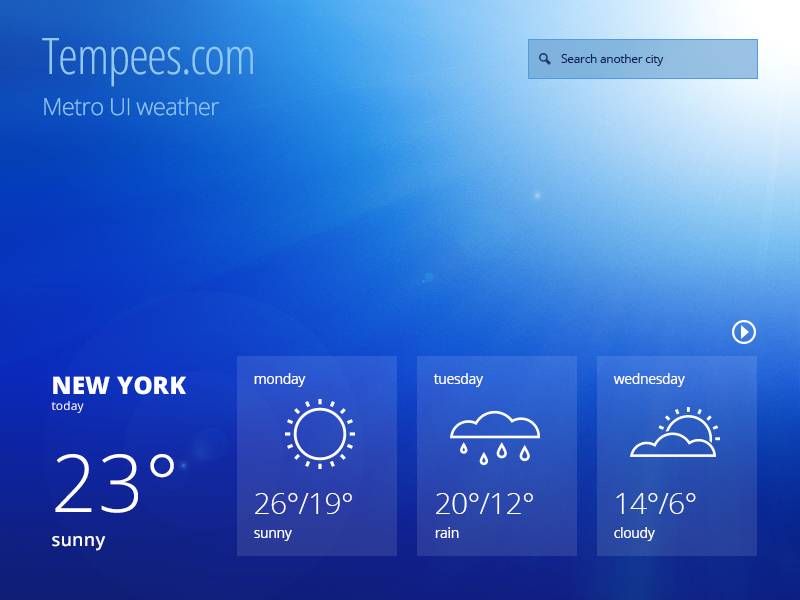
<style>
.page{position:relative;width:800px;height:600px}
.page>*{position:absolute;margin:0}
.t1{font:23.6px/40.4px "OpenSans-Light";letter-spacing:-0.025em;color:#90c9f4}
.t2{font:50.5px/40.4px "OpenSans-CondensedLight";letter-spacing:-0.025em;color:#90c9f4}
.t3{font:12px "OpenSans";letter-spacing:-0.025em;color:#0d1e57}
.t4{font:24px "OpenSans-Extrabold";letter-spacing:0.013em;color:#ffffff}
.t5{font:14px "OpenSans";letter-spacing:-0.025em;color:#ffffff}
.t6{font:12px "OpenSans";letter-spacing:0.013em;color:#ffffff}
.t7{font:80px "OpenSans-Light";letter-spacing:0.013em;color:#ffffff}
.t8{font:30px/24px "OpenSans-Light";letter-spacing:-0.025em;color:#ffffff}
.t9{font:14px/24px "OpenSans";letter-spacing:-0.025em;color:#ffffff}
.t10{font:18px "OpenSans-Semibold";letter-spacing:0.013em;color:#ffffff}
</style>
<div class="page">
<p class="t1" style="left:42px;top:38px;width:211px;height:78px"><span class="t2">Tempees.com<br></span>Metro UI weather</p>
<p class="t3" style="left:561px;top:54px;width:103px;height:12px">Search another city</p>
<p class="t4" style="left:53px;top:376px;width:133px;height:19px">NEW YORK</p>
<p class="t5" style="left:254px;top:373px;width:52px;height:14px">monday</p>
<p class="t5" style="left:433px;top:373px;width:51px;height:14px">tuesday</p>
<p class="t5" style="left:613px;top:373px;width:72px;height:14px">wednesday</p>
<p class="t6" style="left:51px;top:401px;width:33px;height:12px">today</p>
<p class="t7" style="left:55px;top:454px;width:119px;height:59px">23°</p>
<p class="t8" style="left:254px;top:493px;width:98px;height:48px">26°/19°<br><span class="t9">sunny</span></p>
<p class="t8" style="left:435px;top:493px;width:98px;height:45px">20°/12°<br><span class="t9">rain</span></p>
<p class="t8" style="left:614px;top:493px;width:82px;height:48px">14°/6°<br><span class="t9">cloudy</span></p>
<p class="t10" style="left:52px;top:536px;width:54px;height:15px">sunny</p>
</div>
